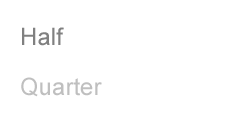
<style>
.page{position:relative;width:240px;height:120px;background:#ffffff}
.page>*{position:absolute;margin:0}
.t1{font:24px "ArialMT";color:#808080}
.t2{font:24px "ArialMT";color:#bfbfbf}
</style>
<div class="page">
<p class="t1" style="left:22px;top:27px;width:42px;height:19px">Half</p>
<p class="t2" style="left:21px;top:77px;width:81px;height:20px">Quarter</p>
</div>
